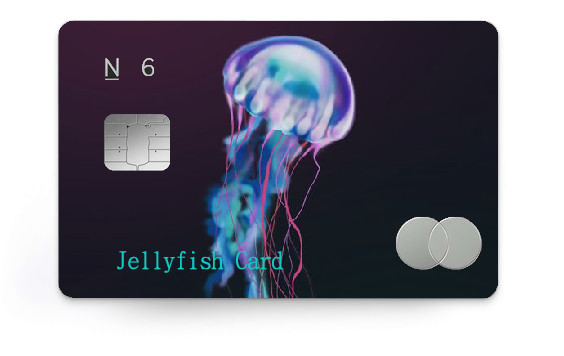
<style>
.page{position:relative;width:564px;height:356px;background:#ffffff}
.page>*{position:absolute;margin:0}
.t1{font:24px "DFKaiShu-SB-Estd-BF";color:#13c8c2}
</style>
<div class="page">
<p class="t1" style="left:117px;top:251px;width:167px;height:22px">Jellyfish Card</p>
</div>
